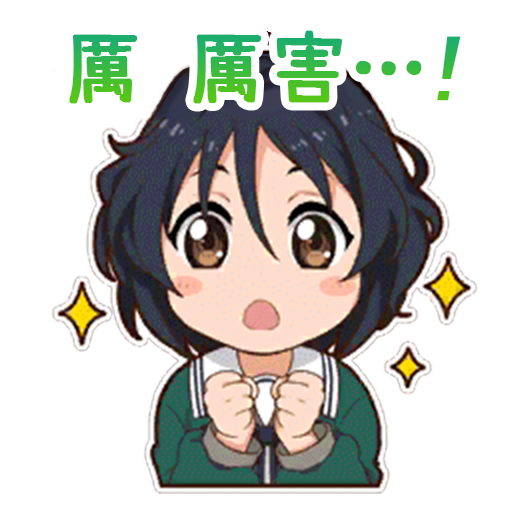
<style>
.page{position:relative;width:512px;height:512px;background:#ffffff}
.page>*{position:absolute;margin:0}
.t1{font:80.3px "SetoFont";font-weight:bold}
.t2{font:93.3px "MS-UIGothic";font-weight:bold;font-style:italic}
</style>
<div class="page">
<p class="t1" style="left:69px;top:30px;width:392px;height:74px">厲 厲害…<span class="t2">!</span></p>
</div>
